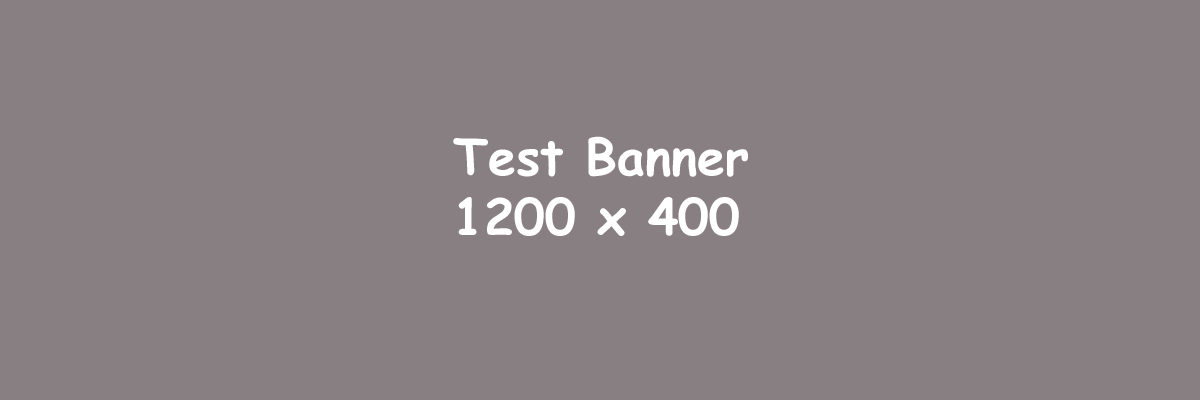
<style>
.page{position:relative;width:1200px;height:400px;background:#887f82}
.page>*{position:absolute;margin:0}
.t1{font:50px "ComicSansMS-Bold";color:#ffffff}
</style>
<div class="page">
<p class="t1" style="left:453px;top:136px;width:295px;height:100px">Test Banner<br>1200 x 400</p>
</div>
